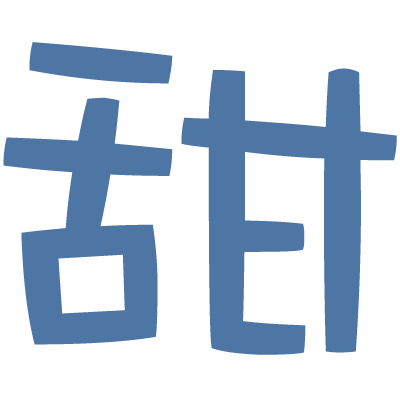
<style>
.page{position:relative;width:400px;height:400px;background:#ffffff}
.page>*{position:absolute;margin:0}
.t1{font:472px "DFWaWaTC-W5";color:#4e76a5}
</style>
<div class="page">
<p class="t1" style="left:3px;top:42px;width:394px;height:313px">甜</p>
</div>
